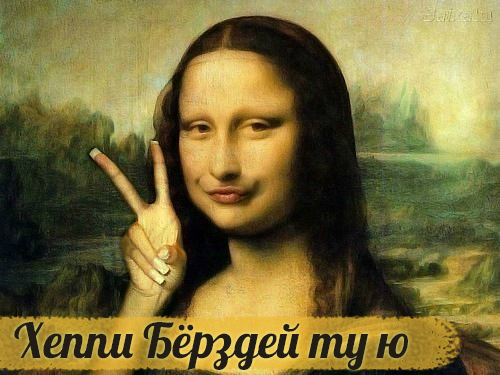
<style>
.page{position:relative;width:500px;height:375px}
.page>*{position:absolute;margin:0}
.t1{font:48px "Lobster";color:#211d14}
</style>
<div class="page">
<p class="t1" style="left:14px;top:322px;width:394px;height:48px">Хеппи Бёрздей ту ю</p>
</div>
